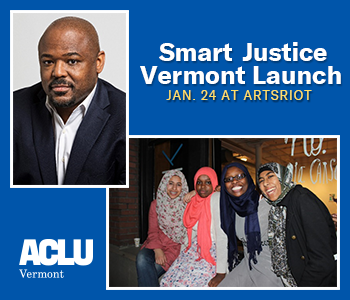
<style>
.page{position:relative;width:350px;height:300px;background:#0055aa}
.page>*{position:absolute;margin:0}
.t1{font:25.7px "GTAmericaACLU-Bold";letter-spacing:-0.005em;color:#ffffff}
.t2{font:25.7px "GTAmericaACLU-Bold";color:#ffffff}
.t3{font:12.8px "GTAmericaACLU-Regular";letter-spacing:0.075em;color:#ffdf69;text-transform:uppercase}
</style>
<div class="page">
<p class="t1" style="left:159px;top:42px;width:168px;height:19px">Smart Justice</p>
<p class="t2" style="left:140px;top:66px;width:201px;height:18px">Vermont Launch</p>
<p class="t3" style="left:166px;top:90px;width:146px;height:10px">jan. 24 at artsriot</p>
</div>
